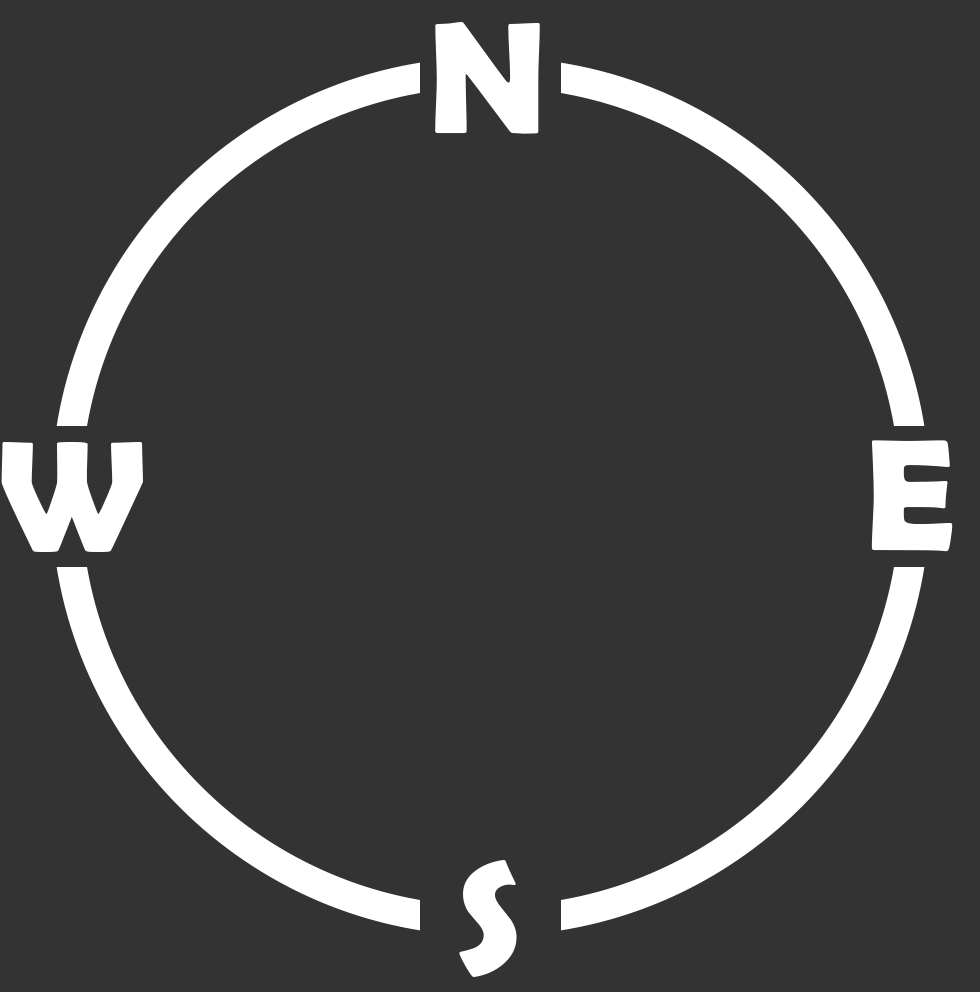
<style>
.page{position:relative;width:980px;height:992px;background:#333333}
.page>*{position:absolute;margin:0}
.t1{font:160px "BerlinSansFBDemi-Bold";color:#ffffff}
</style>
<div class="page">
<p class="t1" style="left:435px;top:22px;width:105px;height:112px">N</p>
<p class="t1" style="left:1px;top:442px;width:142px;height:110px">W</p>
<p class="t1" style="left:871px;top:440px;width:82px;height:112px">E</p>
<p class="t1" style="left:459px;top:860px;width:58px;height:117px">S</p>
</div>
